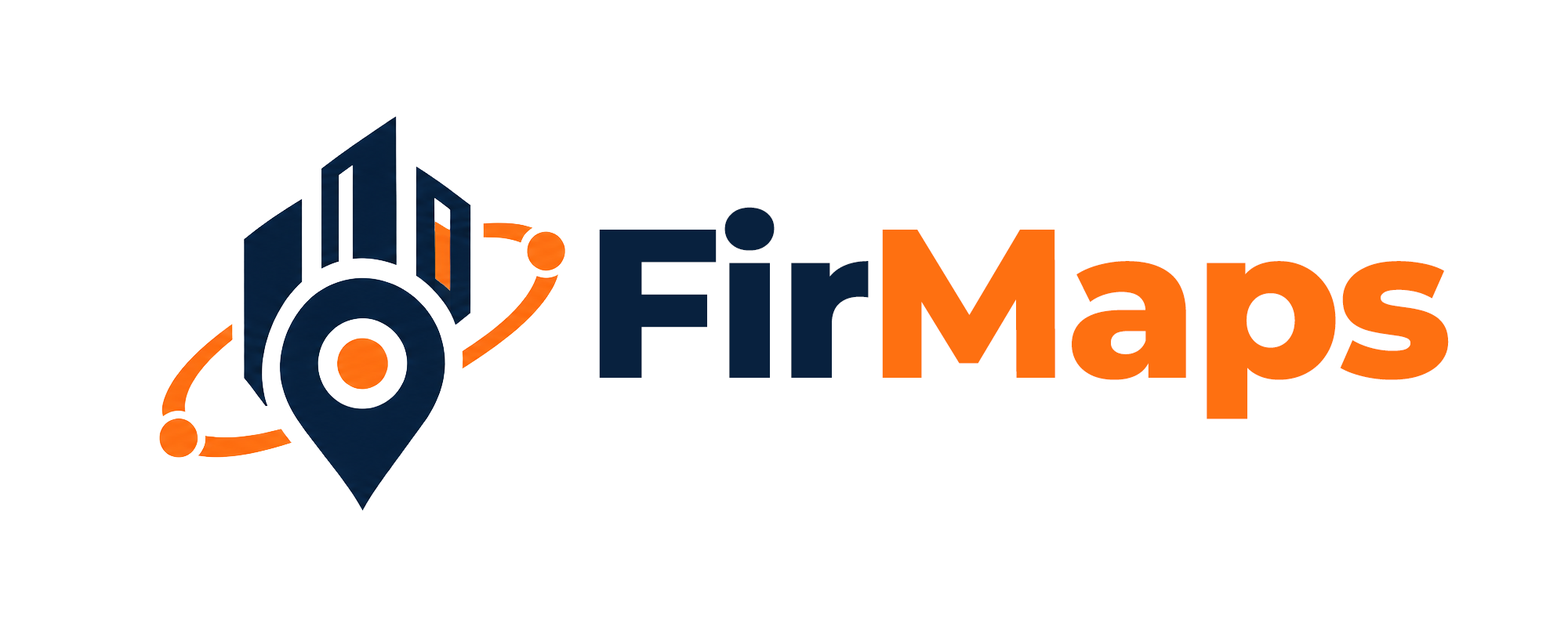
<style>
.page{position:relative;width:1568px;height:627px;background:#ffffff}
.page>*{position:absolute;margin:0}
.t1{font:211.7px "Montserrat-ExtraBold";letter-spacing:-0.02em;color:#fe7011}
.t2{font:211.7px "Montserrat-ExtraBold";letter-spacing:-0.02em;color:#08213e}
</style>
<div class="page">
<p class="t1" style="left:599px;top:207px;width:850px;height:212px"><span class="t2">Fir</span>Maps</p>
</div>
